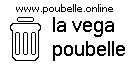
<style>
.page{position:relative;width:128px;height:64px;background:#ffffff}
.page>*{position:absolute;margin:0}
.t1{font:10px "MicrosoftSansSerif";color:#000000}
.t2{font:20px "MicrosoftSansSerif";color:#000000}
</style>
<div class="page">
<p class="t1" style="left:16px;top:4px;width:97px;height:10px">www.poubelle.online</p>
<p class="t2" style="left:53px;top:17px;width:72px;height:44px">la vega<br>poubelle</p>
</div>
